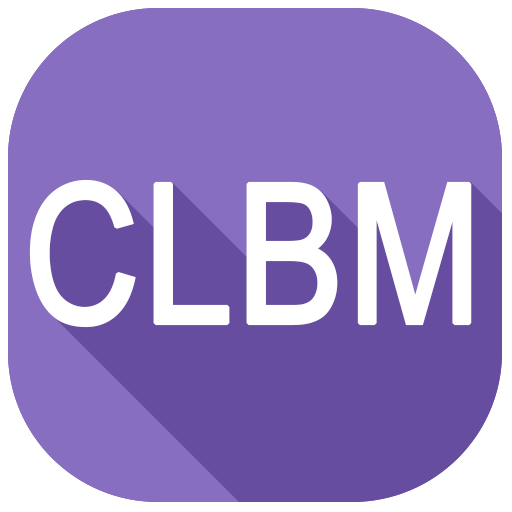
<style>
.page{position:relative;width:512px;height:512px;background:#876ec0}
.page>*{position:absolute;margin:0}
.t1{font:194px "ArialMT";color:#ffffff;font-weight:bold;scale:0.83 1}
</style>
<div class="page">
<p class="t1" style="left:29px;top:179px;width:443px;height:149px">CLBM</p>
</div>
